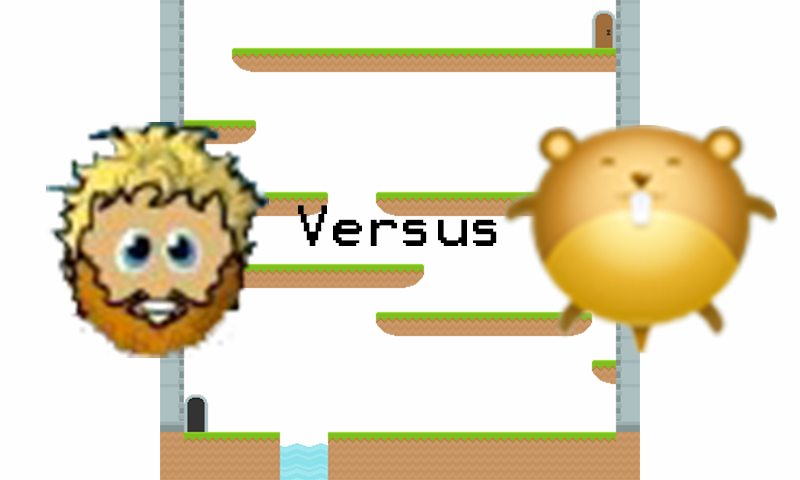
<style>
.page{position:relative;width:800px;height:480px;background:#fefefe}
.page>*{position:absolute;margin:0}
.t1{font:46.7px "Terminal";color:#000000}
</style>
<div class="page">
<p class="t1" style="left:298px;top:205px;width:199px;height:41px">Versus</p>
</div>
